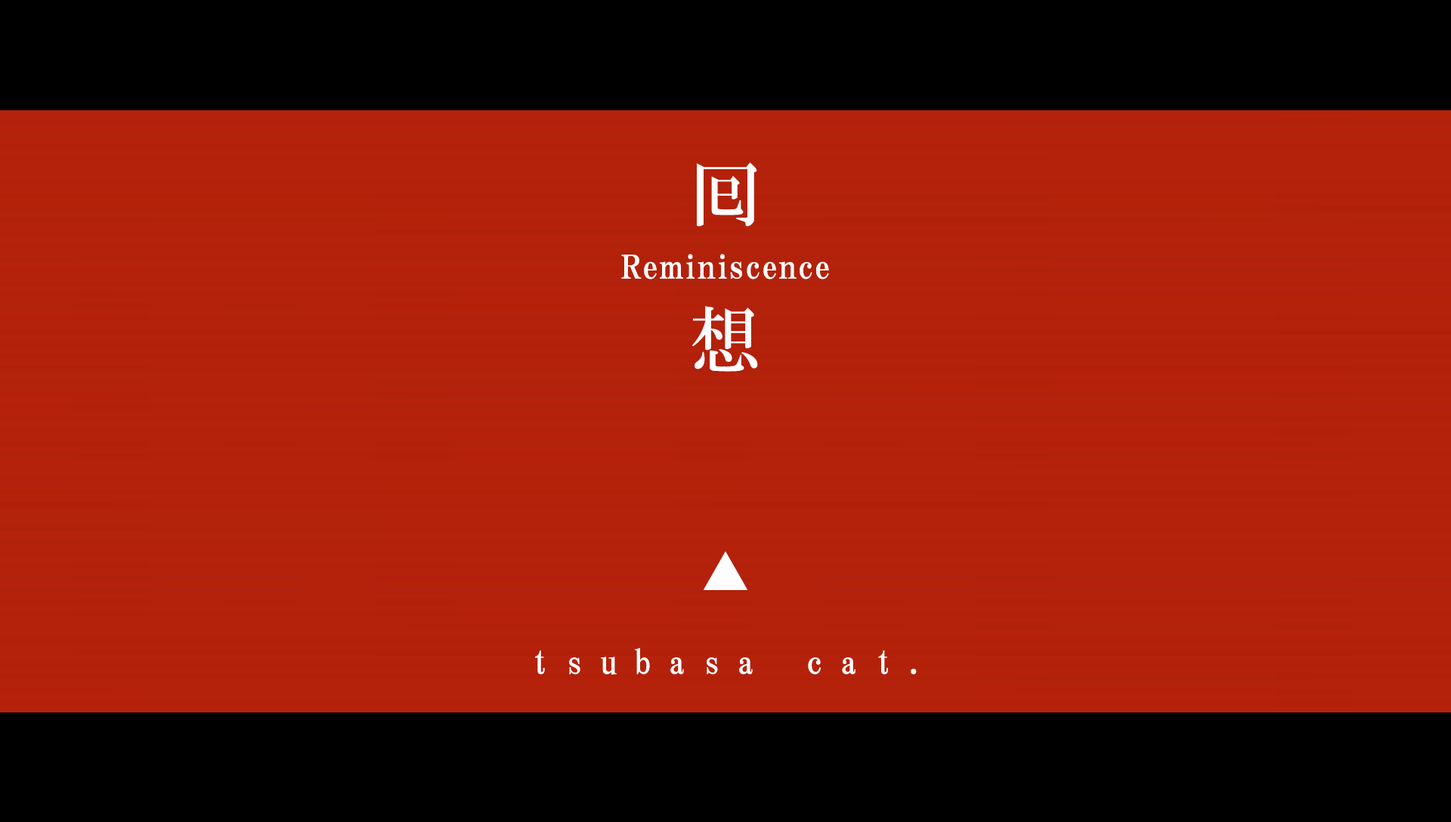
<style>
.page{position:relative;width:1451px;height:822px;background:#000000}
.page>*{position:absolute;margin:0}
.t1{font:71.8px/164.7px "HGMinchoB";letter-spacing:1.03em;color:#fffeff}
.t2{font:32.2px "HGPMinchoE";letter-spacing:0.05em;color:#ffffff}
.t3{font:52.9px "HGMinchoB";letter-spacing:1.03em;color:#fffeff}
.t4{font:34px "HGMinchoB";letter-spacing:0.51em;color:#fffeff}
</style>
<div class="page">
<p class="t1" style="left:692px;top:162px;width:66px;height:210px">囘想</p>
<p class="t2" style="left:621px;top:254px;width:208px;height:26px">Reminiscence</p>
<p class="t3" style="left:703px;top:552px;width:44px;height:38px">▲</p>
<p class="t4" style="left:535px;top:647px;width:381px;height:28px">tsubasa cat.</p>
</div>
